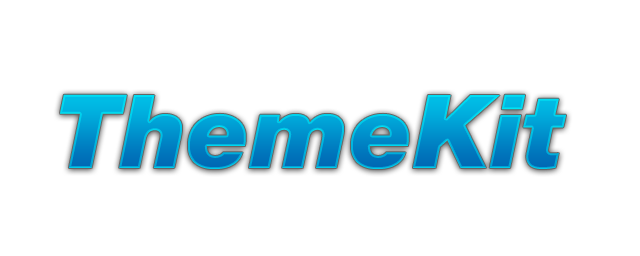
<style>
.page{position:relative;width:640px;height:256px;background:#ffffff}
.page>*{position:absolute;margin:0}
.t1{font:102px "HelveticaNeueLTStd-BlkIt"}
</style>
<div class="page">
<p class="t1" style="left:60px;top:94px;width:506px;height:75px">ThemeKit</p>
</div>
